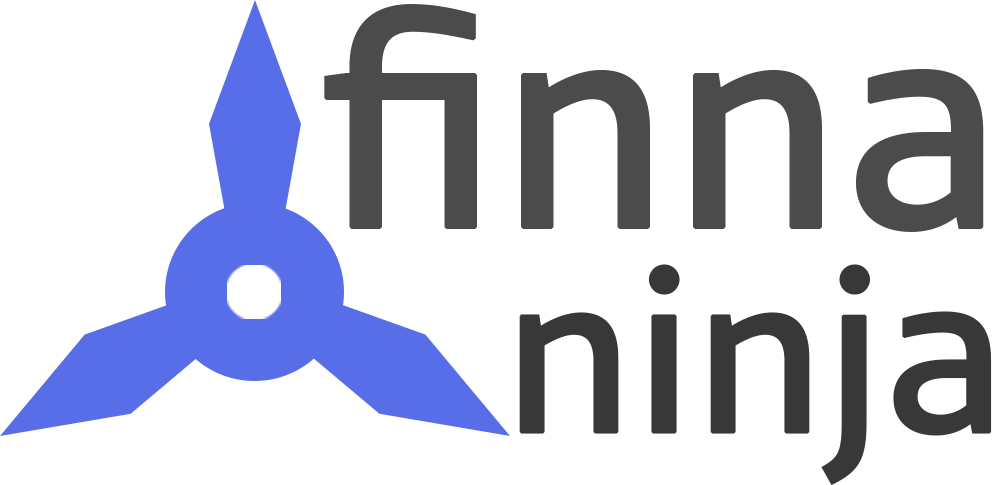
<style>
.page{position:relative;width:992px;height:485px;background:#ffffff}
.page>*{position:absolute;margin:0}
.t1{font:303px/286.6px "XXIICentarRegular";color:#4b4b4b;font-weight:bold}
.t2{font:231.4px/204.7px "XXIICentarRegular";color:#383838;font-weight:bold}
</style>
<div class="page">
<p class="t1" style="left:324px;top:4px;width:668px;height:481px">finna<br> <span class="t2">ninja</span></p>
</div>
